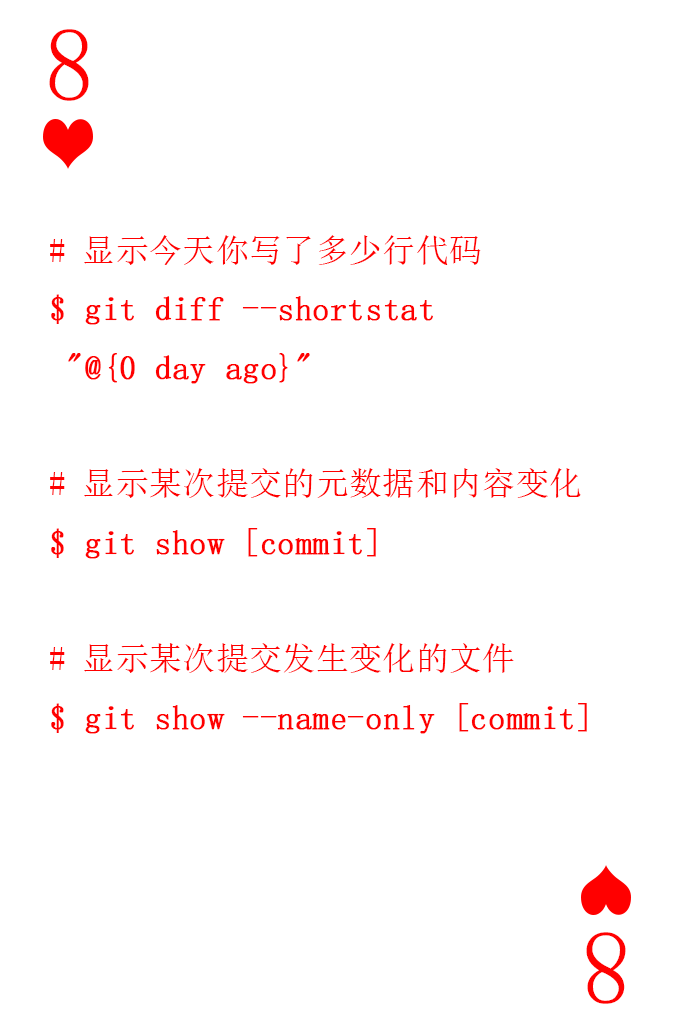
<style>
.page{position:relative;width:673px;height:1028px;background:#ffffff}
.page>*{position:absolute;margin:0}
.t1{font:104.2px "SimSun-ExtB";color:#ff0101;scale:0.93 1}
.t2{font:33.3px "SimSun";color:#ff0000;font-weight:bold}
.t3{font:33.3px "SimSun";color:#ff0000}
</style>
<div class="page">
<p class="t1" style="left:49px;top:29px;width:40px;height:72px">8</p>
<p class="t2" style="left:50px;top:235px;width:537px;height:499px"><span class="t3"># 显示今天你写了多少行代码<br></span>$ git diff --shortstat<br> "@{0 day ago}"<br><span class="t3"><br># 显示某次提交的元数据和内容变化<br></span>$ git show [commit]<br><span class="t3"><br># 显示某次提交发生变化的文件<br></span>$ git show --name-only [commit]</p>
<p class="t1" style="left:586px;top:932px;width:40px;height:72px;rotate:180deg">8</p>
</div>
